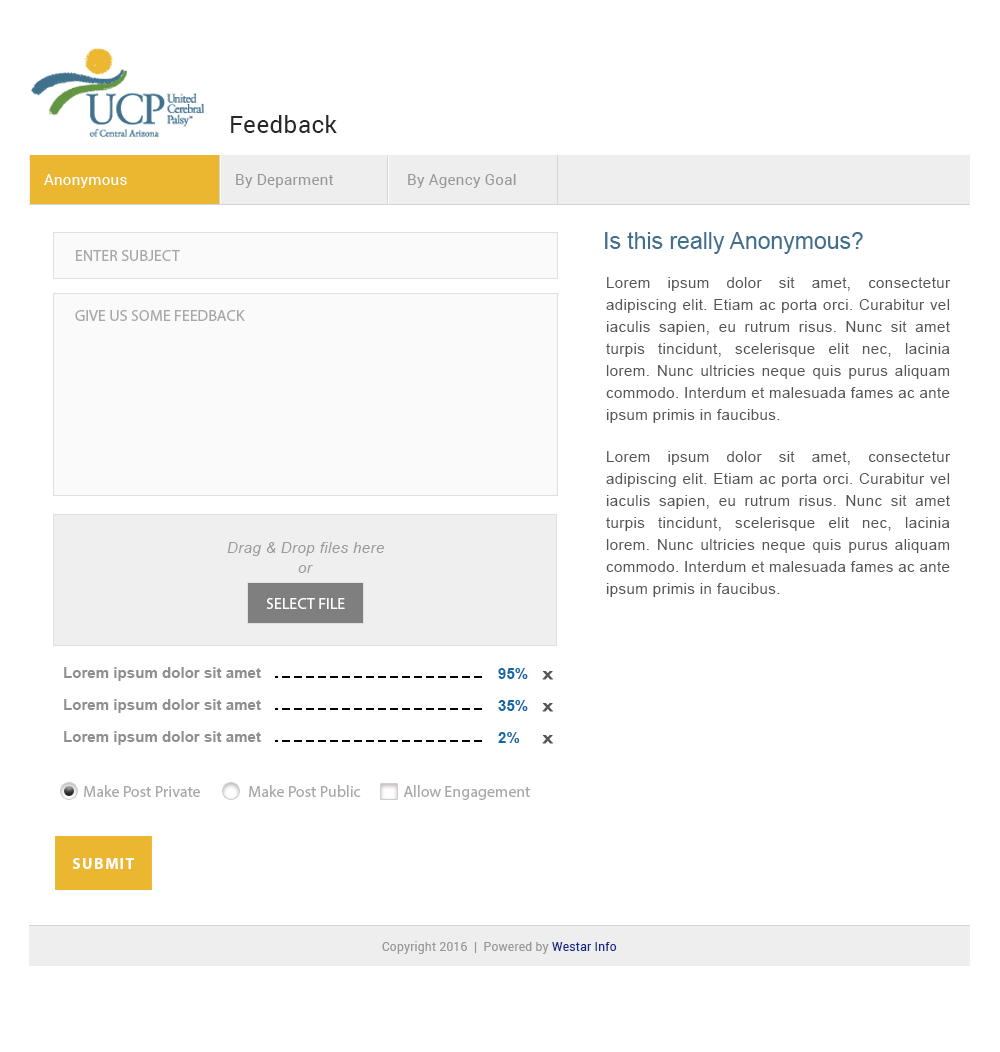
<style>
.page{position:relative;width:1000px;height:1052px;background:#ffffff}
.page>*{position:absolute;margin:0}
.t1{font:24px "Roboto-Regular";letter-spacing:0.02em;color:#282828}
.t2{font:15px "Roboto-Regular";letter-spacing:0.02em;color:#ffffff}
.t3{font:15px "Roboto-Regular";letter-spacing:0.02em;color:#989898}
.t4{font:23px "ArialMT";color:#40708d}
.t5{font:16px "MyriadPro-Regular";color:#a8a8a8;text-transform:uppercase}
.t6{font:15.1px/22px "ArialMT";letter-spacing:0.025em;color:#555555}
.t7{font:16px "MyriadPro-Regular";color:#a8a8a8}
.t8{font:15.1px "Arial-ItalicMT";letter-spacing:0.025em;color:#9b9b9b}
.t9{font:16px "MyriadPro-Regular";color:#ffffff;text-transform:uppercase}
.t10{font:15.1px "Arial-BoldMT";color:#8e8e8e}
.t11{font:15.1px "Arial-BoldMT";color:#1369a6}
.t12{font:11.5px "Arial-BoldMT";color:#555555;font-weight:bold;scale:1.32 1}
.t13{font:16px "MyriadPro-Bold";letter-spacing:0.075em;color:#ffffff}
.t14{font:12px "Roboto-Regular";letter-spacing:0.02em;color:#989898}
.t15{font:12px "Roboto-Regular";letter-spacing:0.02em;color:#172788}
</style>
<div class="page">
<p class="t1" style="left:231px;top:115px;width:106px;height:18px">Feedback</p>
<p class="t2" style="left:44px;top:174px;width:83px;height:14px">Anonymous</p>
<p class="t3" style="left:236px;top:174px;width:98px;height:14px">By Deparment</p>
<p class="t3" style="left:408px;top:174px;width:108px;height:14px">By Agency Goal</p>
<p class="t4" style="left:605px;top:232px;width:258px;height:22px">Is this really Anonymous?</p>
<p class="t5" style="left:76px;top:250px;width:104px;height:11px">enter subject</p>
<p class="t6" style="left:606px;top:277px;width:345px;height:146px;text-align:justify">Lorem ipsum dolor sit amet, consectetur adipiscing elit. Etiam ac porta orci. Curabitur vel iaculis sapien, eu rutrum risus. Nunc sit amet turpis tincidunt, scelerisque elit nec, lacinia lorem. Nunc ultricies neque quis purus aliquam commodo. Interdum et malesuada fames ac ante ipsum primis in faucibus.</p>
<p class="t7" style="left:75px;top:310px;width:170px;height:11px">GIVE US SOME FEEDBACK</p>
<p class="t6" style="left:606px;top:451px;width:345px;height:146px;text-align:justify">Lorem ipsum dolor sit amet, consectetur adipiscing elit. Etiam ac porta orci. Curabitur vel iaculis sapien, eu rutrum risus. Nunc sit amet turpis tincidunt, scelerisque elit nec, lacinia lorem. Nunc ultricies neque quis purus aliquam commodo. Interdum et malesuada fames ac ante ipsum primis in faucibus.</p>
<p class="t8" style="left:227px;top:542px;width:157px;height:14px">Drag &amp; Drop files here</p>
<p class="t8" style="left:298px;top:565px;width:15px;height:8px">or</p>
<p class="t9" style="left:266px;top:598px;width:79px;height:11px">select file</p>
<p class="t10" style="left:64px;top:667px;width:197px;height:14px">Lorem ipsum dolor sit amet</p>
<p class="t11" style="left:498px;top:668px;width:30px;height:11px">95%</p>
<p class="t12" style="left:542px;top:671px;width:11px;height:9px">X</p>
<p class="t10" style="left:64px;top:699px;width:197px;height:14px">Lorem ipsum dolor sit amet</p>
<p class="t11" style="left:498px;top:700px;width:30px;height:11px">35%</p>
<p class="t12" style="left:542px;top:703px;width:11px;height:9px">X</p>
<p class="t10" style="left:64px;top:731px;width:197px;height:14px">Lorem ipsum dolor sit amet</p>
<p class="t11" style="left:498px;top:732px;width:22px;height:11px">2%</p>
<p class="t12" style="left:542px;top:735px;width:11px;height:9px">X</p>
<p class="t7" style="left:84px;top:785px;width:116px;height:12px">Make Post Private</p>
<p class="t7" style="left:249px;top:785px;width:112px;height:12px">Make Post Public</p>
<p class="t7" style="left:403px;top:785px;width:127px;height:15px">Allow Engagement</p>
<p class="t13" style="left:72px;top:858px;width:62px;height:11px">SUBMIT</p>
<p class="t14" style="left:382px;top:941px;width:235px;height:13px">Copyright 2016  |  Powered by <span class="t15">Westar Info</span></p>
</div>
